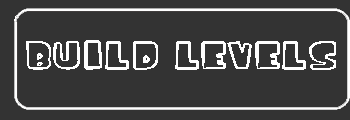
<style>
.page{position:relative;width:350px;height:120px;background:#333333}
.page>*{position:absolute;margin:0}
.t1{font:60px "iceagefont";color:#ffffff}
</style>
<div class="page">
<p class="t1" style="left:26px;top:40px;width:310px;height:30px">Build Levels</p>
</div>
